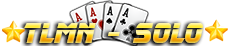
<style>
.page{position:relative;width:230px;height:46px;background:#ffffff}
.page>*{position:absolute;margin:0}
.t1{font:28.8px "SVN-BladeRunner";scale:0.83 1}
</style>
<div class="page">
<p class="t1" style="left:24px;top:23px;width:179px;height:20px">TLMN - SOLO</p>
<p class="t1" style="left:24px;top:23px;width:179px;height:20px">TLMN - SOLO</p>
</div>
